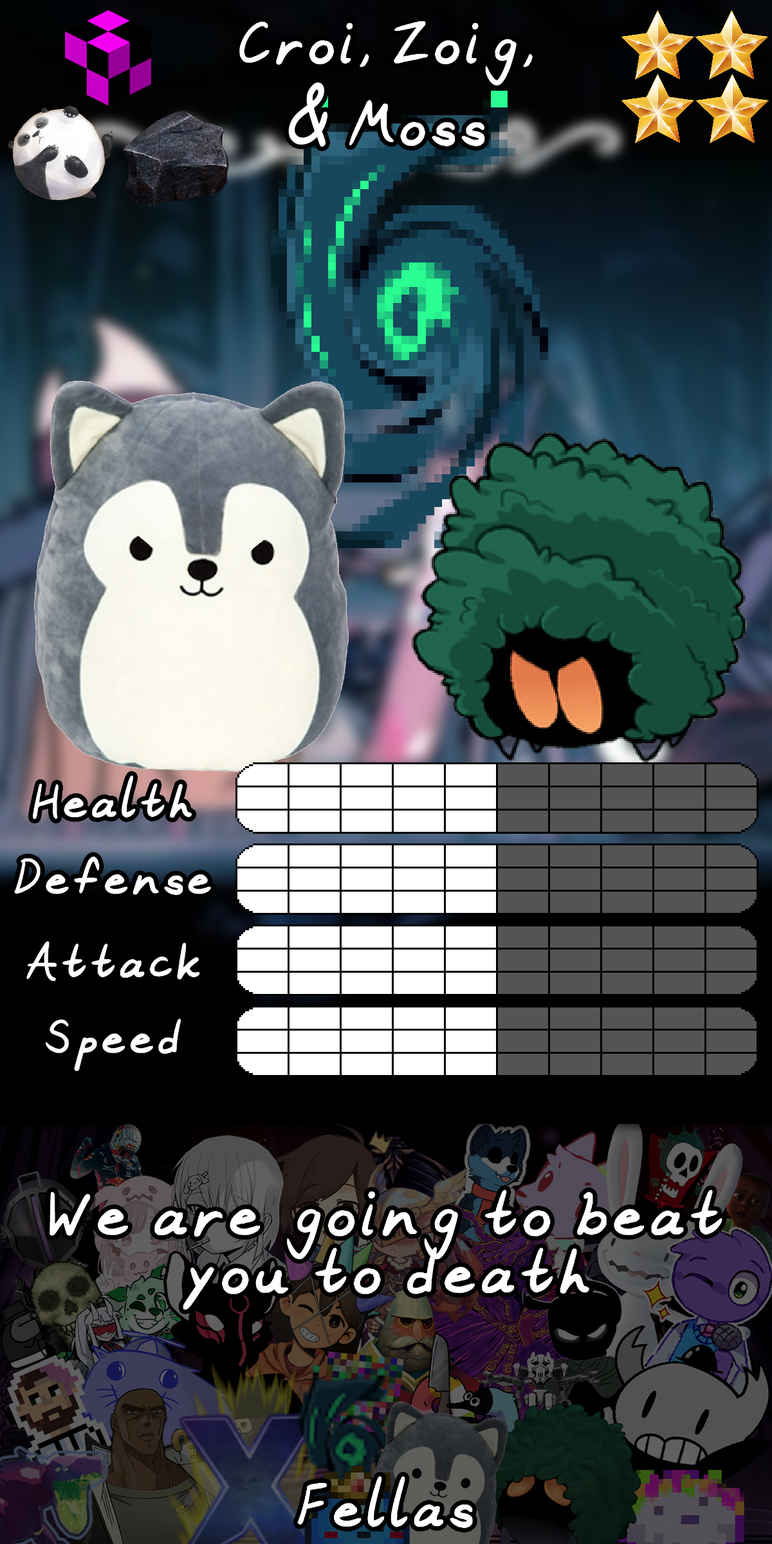
<style>
.page{position:relative;width:772px;height:1544px}
.page>*{position:absolute;margin:0}
.t1{font:113.9px/81.7px "Tykim_1-Regular";color:#ffffff}
.t2{font:135.5px/81.7px "ComicSansMS";color:#ffffff;font-style:italic;scale:0.84 1}
.t3{font:92.7px "Tykim_1-Regular";color:#ffffff}
.t4{font:123.5px "Tykim_1-Regular";color:#ffffff}
.t5{font:112px "Tykim_1-Regular";color:#ffffff}
</style>
<div class="page">
<p class="t1" style="left:239px;top:21px;width:294px;height:126px;text-align:center">Croi, Zoig,<br><span class="t2">&amp;</span> Moss</p>
<p class="t3" style="left:33px;top:775px;width:159px;height:44px">Health</p>
<p class="t3" style="left:14px;top:856px;width:197px;height:40px">Defense</p>
<p class="t3" style="left:26px;top:941px;width:174px;height:40px">Attack</p>
<p class="t3" style="left:46px;top:1019px;width:135px;height:52px">Speed</p>
<p class="t4" style="left:50px;top:1190px;width:673px;height:120px">We are going to beat you to death</p>
<p class="t5" style="left:297px;top:1476px;width:176px;height:53px">Fellas</p>
</div>
